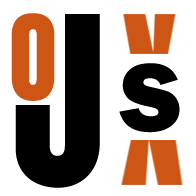
<style>
.page{position:relative;width:196px;height:196px;background:#ffffff}
.page>*{position:absolute;margin:0}
.t1{font:100px "Anton-Regular";color:#cd5615}
.t2{font:200px "Anton-Regular";color:#000000}
.t3{font:100px "FranklinGothic-Heavy";color:#000000}
</style>
<div class="page">
<p class="t1" style="left:11px;top:13px;width:44px;height:88px">O</p>
<p class="t2" style="left:15px;top:14px;width:85px;height:174px">J</p>
<p class="t3" style="left:119px;top:63px;width:61px;height:70px">S</p>
</div>
